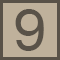
<style>
.page{position:relative;width:60px;height:60px;background:#bfb19b}
.page>*{position:absolute;margin:0}
.t1{font:60px "ArialMT";color:#595248}
</style>
<div class="page">
<p class="t1" style="left:15px;top:9px;width:29px;height:42px">9</p>
</div>
